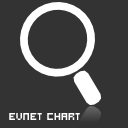
<style>
.page{position:relative;width:128px;height:128px;background:#333333}
.page>*{position:absolute;margin:0}
.t1{font:11.3px "Hooge0555";color:#ffffff;text-transform:uppercase}
</style>
<div class="page">
<p class="t1" style="left:9px;top:113px;width:71px;height:7px">Evnet Chart</p>
</div>
